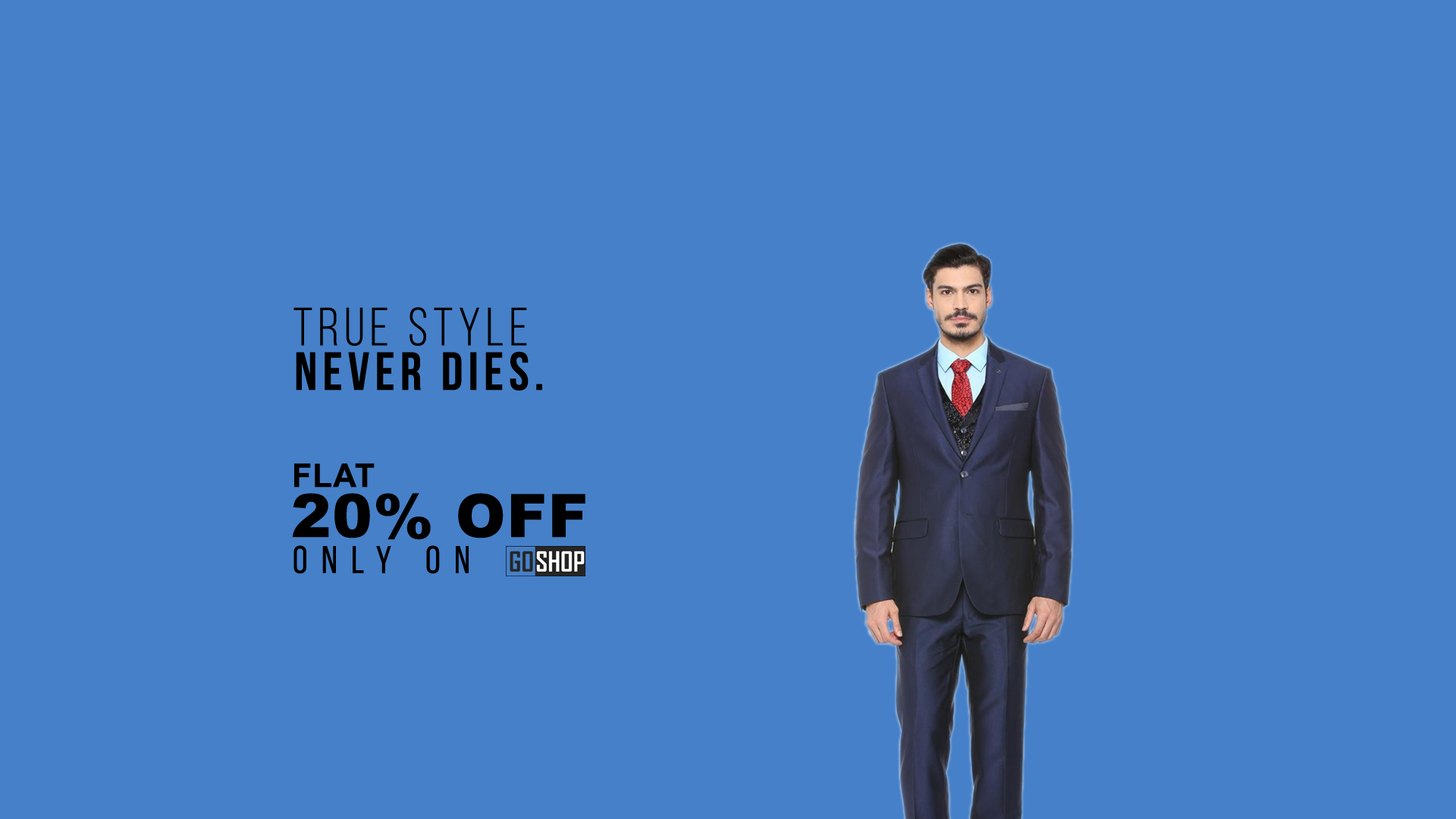
<style>
.page{position:relative;width:1456px;height:819px;background:#4680c8}
.page>*{position:absolute;margin:0}
.t1{font:53.8px "BebasNeueBook";letter-spacing:0.1em;color:#000000}
.t2{font:53.8px "BebasNeueBold";letter-spacing:0.1em;color:#000000}
.t3{font:32.6px "Arial-BoldMT";letter-spacing:0.02em;color:#000000}
.t4{font:59.9px "Arial-Black";letter-spacing:0.02em;color:#000000}
.t5{font:38.7px "BebasNeueRegular";letter-spacing:0.36em;color:#000000}
</style>
<div class="page">
<p class="t1" style="left:293px;top:307px;width:234px;height:39px">True Style</p>
<p class="t2" style="left:296px;top:351px;width:246px;height:40px">NEVER DIES.</p>
<p class="t3" style="left:294px;top:463px;width:81px;height:25px">FLAT</p>
<p class="t4" style="left:292px;top:493px;width:293px;height:47px">20% OFF</p>
<p class="t5" style="left:293px;top:545px;width:176px;height:29px">only on</p>
</div>
